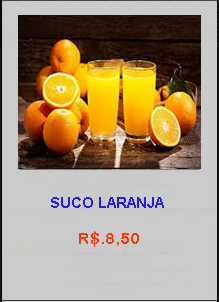
<style>
.page{position:relative;width:219px;height:302px;background:#cbcbcb}
.page>*{position:absolute;margin:0}
.t1{font:14.7px "Arial-BoldMT";color:#261cf4}
.t2{font:16px "ArialRoundedMTBold";color:#f33c12}
</style>
<div class="page">
<p class="t1" style="left:51px;top:197px;width:113px;height:11px">SUCO LARANJA</p>
<p class="t2" style="left:79px;top:231px;width:60px;height:16px">R$.8,50</p>
</div>
